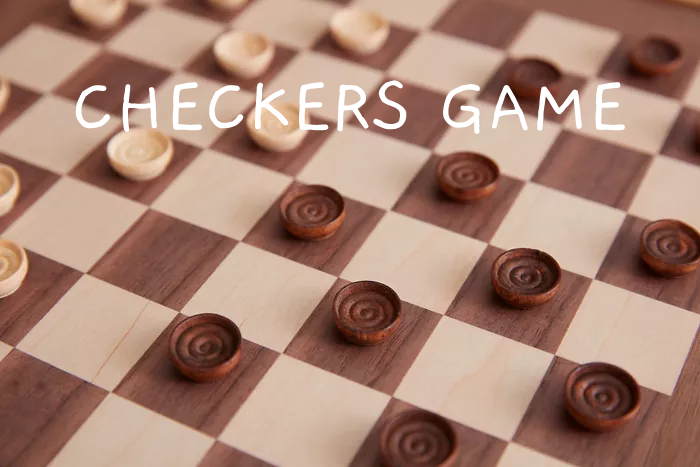
<style>
.page{position:relative;width:700px;height:467px}
.page>*{position:absolute;margin:0}
.t1{font:80px "Gaegu-Regular";color:#ffffff}
</style>
<div class="page">
<p class="t1" style="left:75px;top:80px;width:550px;height:54px">CHECKERS GAME</p>
</div>
